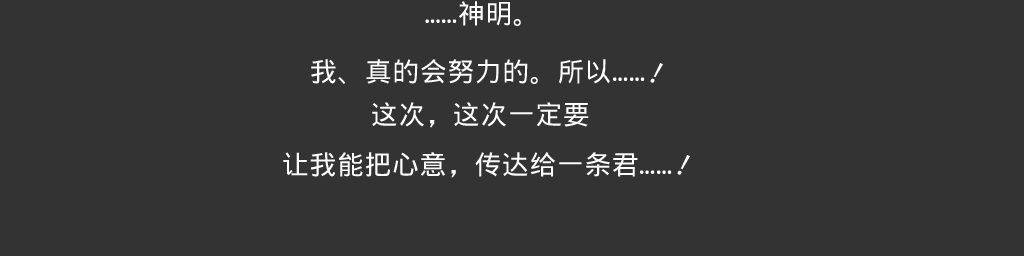
<style>
.page{position:relative;width:1024px;height:256px;background:#333333}
.page>*{position:absolute;margin:0}
.t1{font:26.7px "WenQuanYiMicroHeiMono";letter-spacing:0.03em;color:#fefefe}
.t2{font:29.3px "WenQuanYiMicroHeiMono";letter-spacing:0.05em;color:#fefefe}
</style>
<div class="page">
<p class="t1" style="left:425px;top:1px;width:96px;height:25px">……神明。</p>
<p class="t1" style="left:311px;top:59px;width:334px;height:25px">我、真的会努力的。所以……</p>
<p class="t2" style="left:650px;top:63px;width:13px;height:20px;rotate:28deg">!</p>
<p class="t1" style="left:372px;top:102px;width:217px;height:26px">这次，这次一定要</p>
<p class="t1" style="left:283px;top:152px;width:389px;height:26px">让我能把心意，传达给一条君……</p>
<p class="t2" style="left:677px;top:155px;width:13px;height:20px;rotate:28deg">!</p>
</div>
